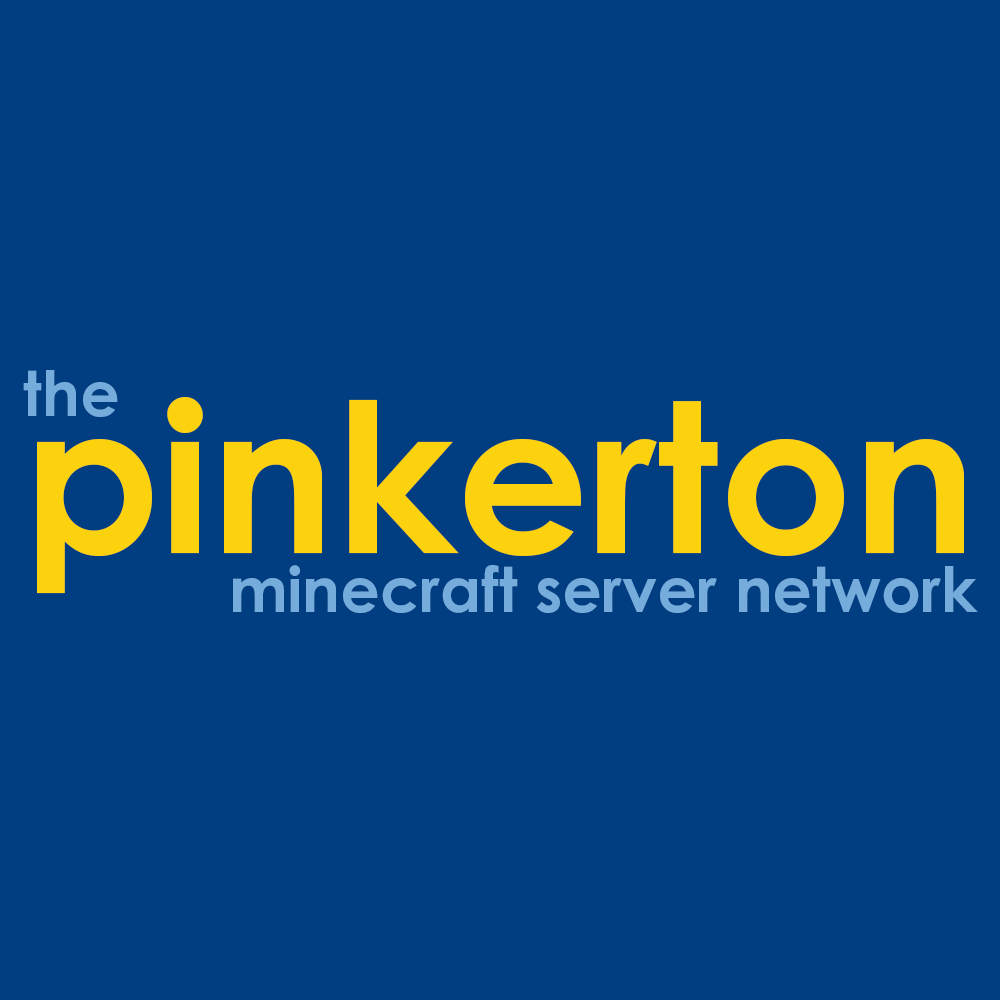
<style>
.page{position:relative;width:1000px;height:1000px;background:#003e81}
.page>*{position:absolute;margin:0}
.t1{font:62.5px "CenturyGothicPro-Bold";color:#76acdc}
.t2{font:208.3px "CenturyGothicPro-Bold";color:#fcd20f}
</style>
<div class="page">
<p class="t1" style="left:23px;top:370px;width:95px;height:47px">the</p>
<p class="t2" style="left:37px;top:397px;width:927px;height:197px">pinkerton</p>
<p class="t1" style="left:233px;top:565px;width:745px;height:48px">minecraft server network</p>
</div>
